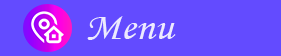
<style>
.page{position:relative;width:281px;height:56px;background:#634bff}
.page>*{position:absolute;margin:0}
.t1{font:37.5px "MonotypeCorsiva";color:#edeafe;scale:1.12 1}
</style>
<div class="page">
<p class="t1" style="left:87px;top:16px;width:89px;height:24px">Menu</p>
</div>
